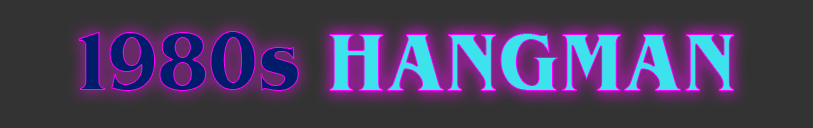
<style>
.page{position:relative;width:813px;height:128px;background:#333333}
.page>*{position:absolute;margin:0}
.t1{font:74.7px "BenguiatBold";color:#011c69;scale:0.88 1}
.t2{font:74.7px "BenguiatBold";color:#3ce3ed;scale:0.88 1}
</style>
<div class="page">
<p class="t1" style="left:78px;top:31px;width:221px;height:60px">1980s</p>
<p class="t2" style="left:329px;top:33px;width:406px;height:58px">HANGMAN</p>
</div>
